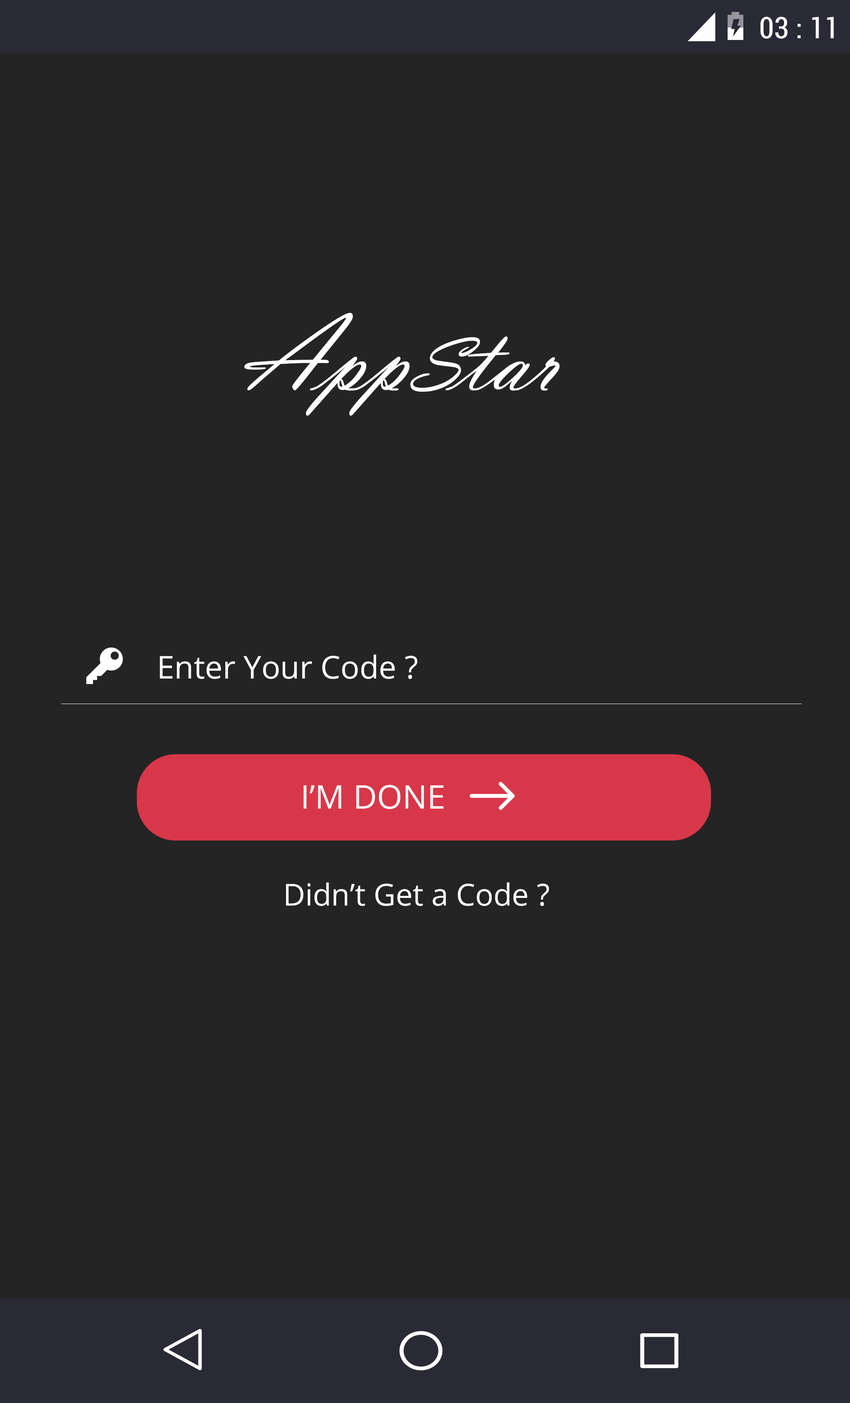
<style>
.page{position:relative;width:850px;height:1403px;background:#242424}
.page>*{position:absolute;margin:0}
.t1{font:30.9px "Roboto-Condensed";color:#ffffff}
.t2{font:108.2px "VladimirScript";color:#ffffff}
.t3{font:77.5px "VladimirScript";color:#ffffff}
.t4{font:31.5px "OpenSans";color:#ffffff}
.t5{font:32.7px "OpenSans";color:#ffffff}
.t6{font:30.3px "OpenSans";color:#ffffff}
</style>
<div class="page">
<p class="t1" style="left:760px;top:17px;width:74px;height:22px">03 : 11</p>
<p class="t2" style="left:244px;top:313px;width:316px;height:103px">App<span class="t3">S</span>tar</p>
<p class="t4" style="left:160px;top:654px;width:257px;height:25px">Enter Your Code ?</p>
<p class="t5" style="left:303px;top:785px;width:141px;height:24px">I’M DONE</p>
<p class="t6" style="left:286px;top:882px;width:263px;height:24px">Didn’t Get a Code ?</p>
</div>
